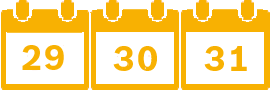
<style>
.page{position:relative;width:270px;height:90px;background:#ffffff}
.page>*{position:absolute;margin:0}
.t1{font:34px "BoschSans-Bold";letter-spacing:0.075em;color:#f8b102;scale:1.03 1}
</style>
<div class="page">
<p class="t1" style="left:22px;top:45px;width:42px;height:25px">29</p>
<p class="t1" style="left:113px;top:46px;width:44px;height:25px">30</p>
<p class="t1" style="left:204px;top:46px;width:43px;height:25px">31</p>
</div>
